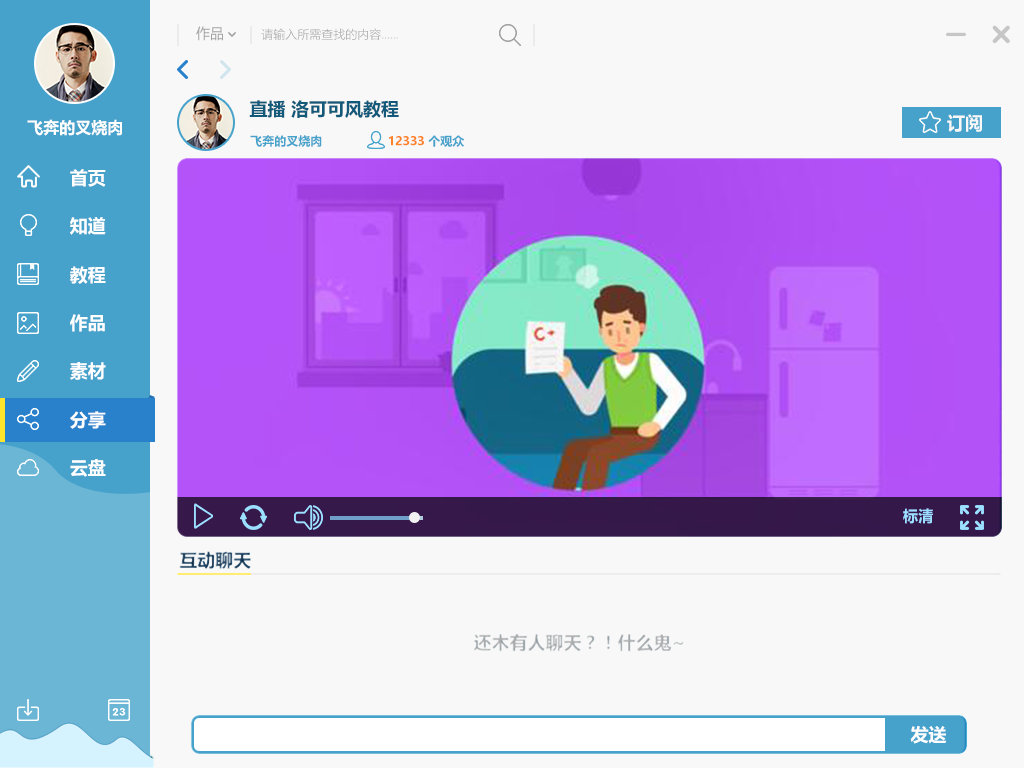
<style>
.page{position:relative;width:1024px;height:768px;background:#f8f8f8}
.page>*{position:absolute;margin:0}
.t1{font:14px "MicrosoftYaHei";color:#a3a3a3}
.t2{font:12px "MicrosoftYaHeiLight";color:#a3a3a3}
.t3{font:18px "MicrosoftYaHei-Bold";color:#135a7a}
.t4{font:16px "MicrosoftYaHei-Bold";color:#ffffff}
.t5{font:18px "MicrosoftYaHei-Bold";color:#f8f8f8}
.t6{font:12px "MicrosoftYaHei-Bold";color:#46a2cb}
.t7{font:12px "MicrosoftYaHei-Bold";color:#fe8227}
.t8{font:18px "MicrosoftYaHei-Bold";color:#ffffff}
.t9{font:15.2px "MicrosoftYaHei-Bold";color:#9be0ff}
.t10{font:18px "MicrosoftYaHei-Bold"}
.t11{font:18px "MicrosoftYaHei-Bold";color:#b0b0b0}
</style>
<div class="page">
<p class="t1" style="left:196px;top:26px;width:27px;height:15px">作品</p>
<p class="t2" style="left:261px;top:28px;width:137px;height:12px">请输入所需查找的内容……</p>
<p class="t3" style="left:249px;top:100px;width:150px;height:18px">直播 洛可可风教程</p>
<p class="t4" style="left:27px;top:119px;width:95px;height:17px">飞奔的叉烧肉</p>
<p class="t5" style="left:947px;top:114px;width:35px;height:18px">订阅</p>
<p class="t6" style="left:250px;top:135px;width:72px;height:12px">飞奔的叉烧肉</p>
<p class="t7" style="left:389px;top:135px;width:75px;height:12px">12333 <span class="t6">个观众</span></p>
<p class="t8" style="left:70px;top:169px;width:36px;height:18px">首页</p>
<p class="t8" style="left:70px;top:217px;width:36px;height:18px">知道</p>
<p class="t8" style="left:70px;top:266px;width:36px;height:18px">教程</p>
<p class="t8" style="left:70px;top:314px;width:35px;height:18px">作品</p>
<p class="t8" style="left:70px;top:362px;width:36px;height:18px">素材</p>
<p class="t8" style="left:70px;top:411px;width:36px;height:18px">分享</p>
<p class="t8" style="left:70px;top:459px;width:36px;height:18px">云盘</p>
<p class="t9" style="left:903px;top:508px;width:30px;height:16px">标清</p>
<p class="t10" style="left:179px;top:551px;width:72px;height:18px">互动聊天</p>
<p class="t11" style="left:473px;top:633px;width:211px;height:19px">还木有人聊天？！什么鬼~</p>
<p class="t8" style="left:910px;top:726px;width:37px;height:18px">发送</p>
</div>
